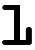
<style>
.page{position:relative;width:35px;height:50px;background:#ffffff}
.page>*{position:absolute;margin:0}
.t1{font:61.9px "OCRAExtended";color:#000000;scale:1.16 1}
</style>
<div class="page">
<p class="t1" style="left:2px;top:5px;width:30px;height:40px">1</p>
</div>
